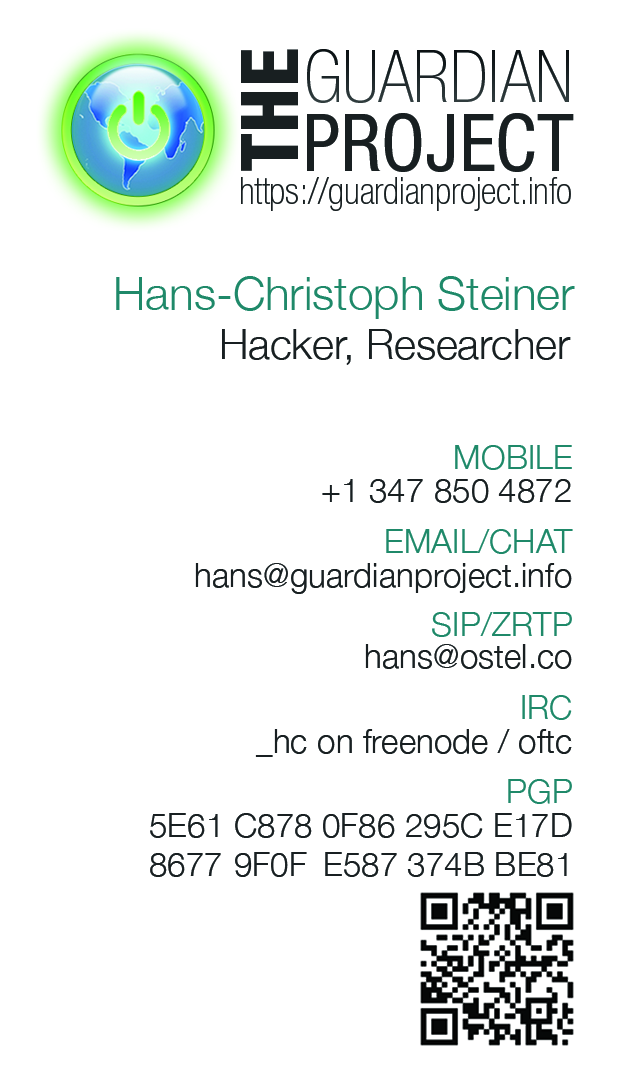
<style>
.page{position:relative;width:638px;height:1088px;background:#ffffff}
.page>*{position:absolute;margin:0}
.t1{font:79.2px "HelveticaNeueLTStd-HvCn";color:#181f21}
.t2{font:72.9px "HelveticaNeueLTStd-ThCn";color:#181f21}
.t3{font:79.2px "HelveticaNeueLTStd-Cn";color:#181f21}
.t4{font:37.5px "HelveticaNeueLTStd-ThCn";color:#181f21}
.t5{font:45.8px "HelveticaNeue-Light";color:#1f8969}
.t6{font:41.7px "HelveticaNeue-Light";color:#181f21}
.t7{font:33.3px/83.3px "HelveticaNeue-Light";color:#1f8969}
.t8{font:33.3px "HelveticaNeue-Light";color:#181f21}
</style>
<div class="page">
<p class="t1" style="left:241px;top:49px;width:57px;height:122px;rotate:-90deg">THE</p>
<p class="t2" style="left:307px;top:49px;width:262px;height:54px">GUARDIAN</p>
<p class="t3" style="left:307px;top:113px;width:267px;height:59px">PROJECT</p>
<p class="t4" style="left:241px;top:177px;width:330px;height:34px">https://guardianproject.info</p>
<p class="t5" style="left:116px;top:276px;width:459px;height:43px">Hans-Christoph Steiner</p>
<p class="t6" style="left:222px;top:329px;width:349px;height:36px">Hacker, Researcher</p>
<p class="t7" style="left:386px;top:445px;width:187px;height:359px;text-align:right">MOBILE<br>EMAIL/CHAT<br>SIP/ZRTP<br>IRC<br>PGP</p>
<p class="t8" style="left:322px;top:479px;width:249px;height:24px">+1 347 850 4872</p>
<p class="t8" style="left:195px;top:563px;width:377px;height:31px">hans@guardianproject.info</p>
<p class="t8" style="left:365px;top:644px;width:207px;height:25px">hans@ostel.co</p>
<p class="t8" style="left:255px;top:729px;width:317px;height:28px">_hc on freenode / oftc</p>
<p class="t8" style="left:150px;top:813px;width:422px;height:64px">5E61 C878 0F86 295C E17D<br>8677 9F0F E587 374B BE81</p>
</div>
